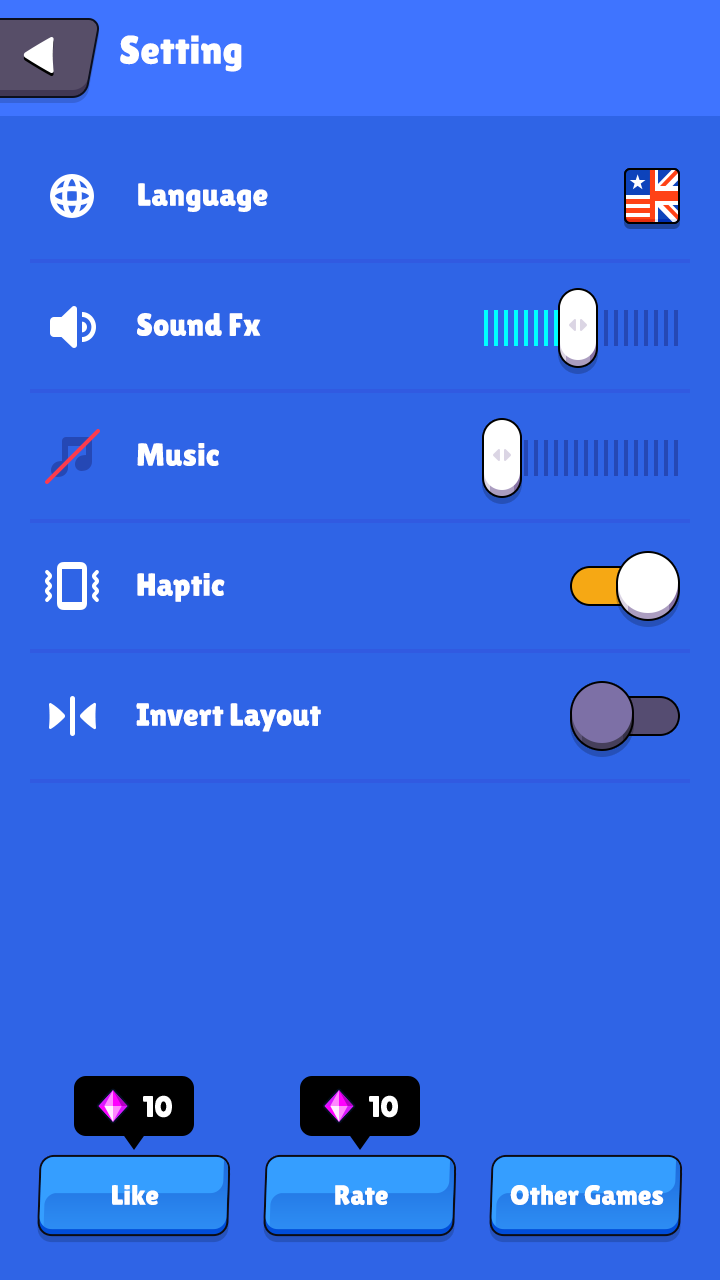
<style>
.page{position:relative;width:720px;height:1280px;background:#2f64e6}
.page>*{position:absolute;margin:0}
.t1{font:40px "LilitaOne";color:#ffffff}
.t2{font:32px "LilitaOne";color:#ffffff}
.t3{font:32px/130px "LilitaOne";color:#ffffff}
.t4{font:30px "LilitaOne";color:#ffffff;text-transform:uppercase}
.t5{font:28px "LilitaOne";color:#ffffff}
</style>
<div class="page">
<p class="t1" style="left:120px;top:35px;width:122px;height:37px">Setting</p>
<p class="t2" style="left:138px;top:183px;width:130px;height:29px">Language</p>
<p class="t3" style="left:137px;top:313px;width:124px;height:289px">Sound Fx<br>Music<br>Haptic</p>
<p class="t2" style="left:136px;top:703px;width:185px;height:29px">Invert Layout</p>
<p class="t4" style="left:143px;top:1095px;width:29px;height:23px">10</p>
<p class="t4" style="left:369px;top:1095px;width:29px;height:23px">10</p>
<p class="t5" style="left:112px;top:1185px;width:47px;height:20px">Like</p>
<p class="t5" style="left:335px;top:1185px;width:53px;height:20px">Rate</p>
<p class="t5" style="left:510px;top:1184px;width:154px;height:21px">Other Games</p>
</div>
